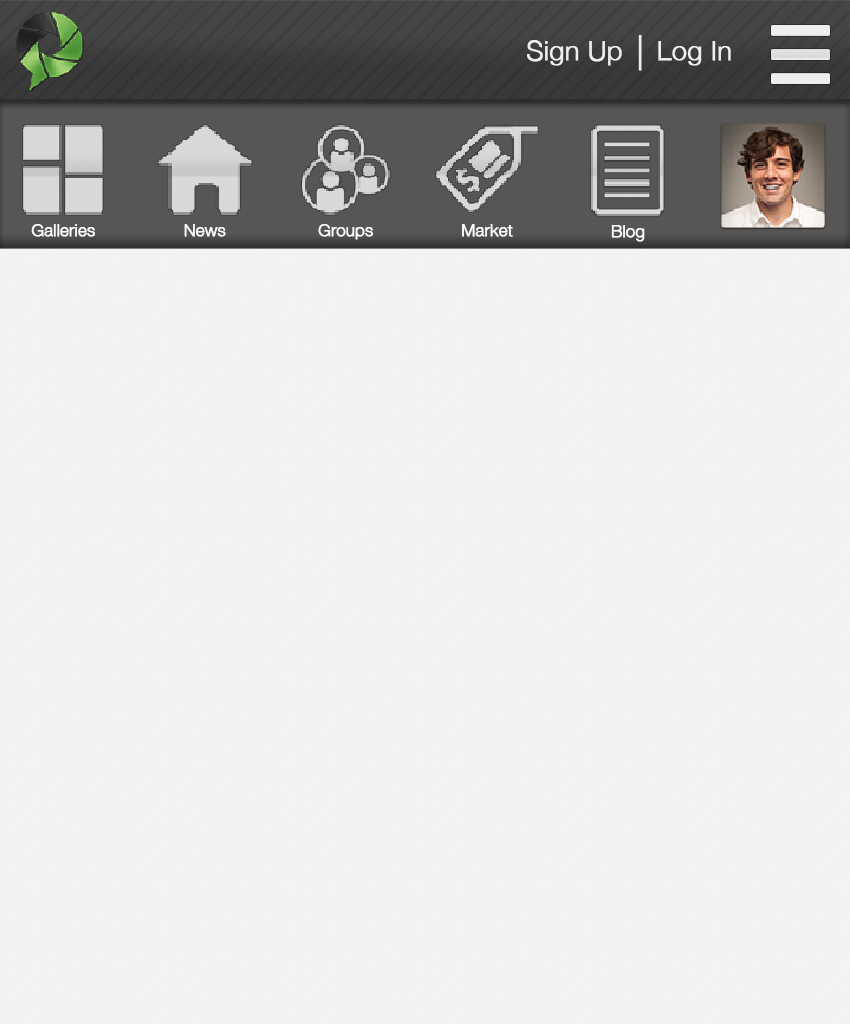
<style>
.page{position:relative;width:850px;height:1024px;background:#f3f3f3}
.page>*{position:absolute;margin:0}
.t1{font:26.6px "HelveticaNeue-Light";letter-spacing:-0.01em;color:#eeeeee;font-weight:bold}
.t2{font:35.4px "HelveticaNeue-Light";letter-spacing:-0.01em;color:#eeeeee;font-weight:bold;scale:0.94 1}
.t3{font:16.6px "HelveticaNeue-Light";letter-spacing:-0.01em;color:#ffffff;font-weight:bold}
</style>
<div class="page">
<p class="t1" style="left:527px;top:40px;width:95px;height:26px">Sign Up</p>
<p class="t2" style="left:638px;top:35px;width:4px;height:36px">|</p>
<p class="t1" style="left:658px;top:41px;width:73px;height:25px">Log In</p>
<p class="t3" style="left:31px;top:224px;width:64px;height:13px">Galleries</p>
<p class="t3" style="left:184px;top:224px;width:42px;height:13px">News</p>
<p class="t3" style="left:318px;top:224px;width:55px;height:16px">Groups</p>
<p class="t3" style="left:462px;top:224px;width:51px;height:13px">Market</p>
<p class="t3" style="left:611px;top:225px;width:34px;height:17px">Blog</p>
</div>
